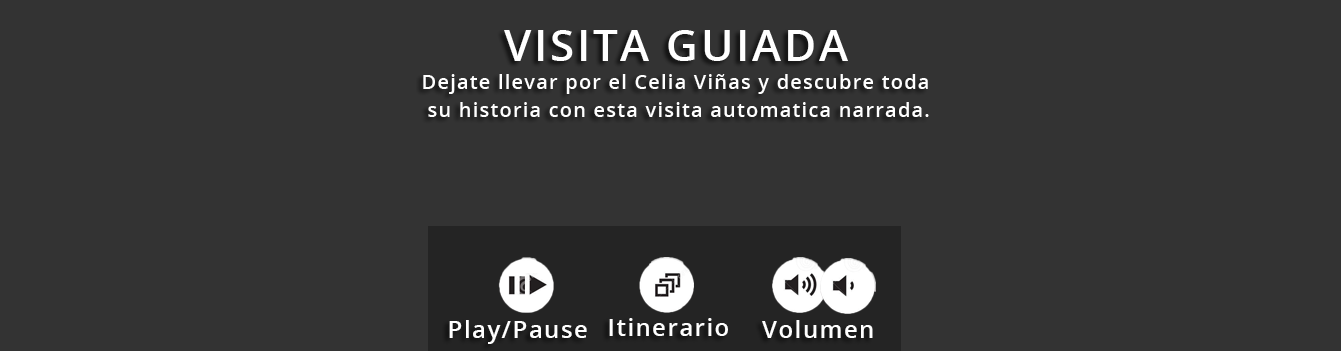
<style>
.page{position:relative;width:1341px;height:351px;background:#333333}
.page>*{position:absolute;margin:0}
.t1{font:44px "OpenSans-Semibold";letter-spacing:0.06em;color:#ffffff}
.t2{font:20px/28px "OpenSans-Semibold";letter-spacing:0.06em;color:#ffffff}
.t3{font:24px "OpenSans-Semibold";letter-spacing:0.06em;color:#ffffff}
</style>
<div class="page">
<p class="t1" style="left:504px;top:30px;width:344px;height:31px">VISITA GUIADA</p>
<p class="t2" style="left:423px;top:74px;width:506px;height:43px;text-align:center">Dejate llevar por el Celia Viñas y descubre toda <br>su historia con esta visita automatica narrada.</p>
<p class="t3" style="left:609px;top:318px;width:119px;height:18px">Itinerario</p>
<p class="t3" style="left:449px;top:320px;width:138px;height:24px">Play/Pause</p>
<p class="t3" style="left:762px;top:320px;width:111px;height:18px">Volumen</p>
</div>
